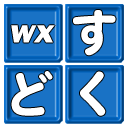
<style>
.page{position:relative;width:128px;height:128px;background:#ffffff}
.page>*{position:absolute;margin:0}
.t1{font:47.5px "HeiseiMaruGoStd-W8";color:#ffffff}
.t2{font:35px "FranklinGothic-HeavyItalic";color:#ffffff}
</style>
<div class="page">
<p class="t1" style="left:73px;top:10px;width:43px;height:46px">す</p>
<p class="t2" style="left:11px;top:25px;width:44px;height:18px">wx</p>
<p class="t1" style="left:11px;top:71px;width:42px;height:45px">ど</p>
<p class="t1" style="left:80px;top:71px;width:26px;height:45px">く</p>
</div>
